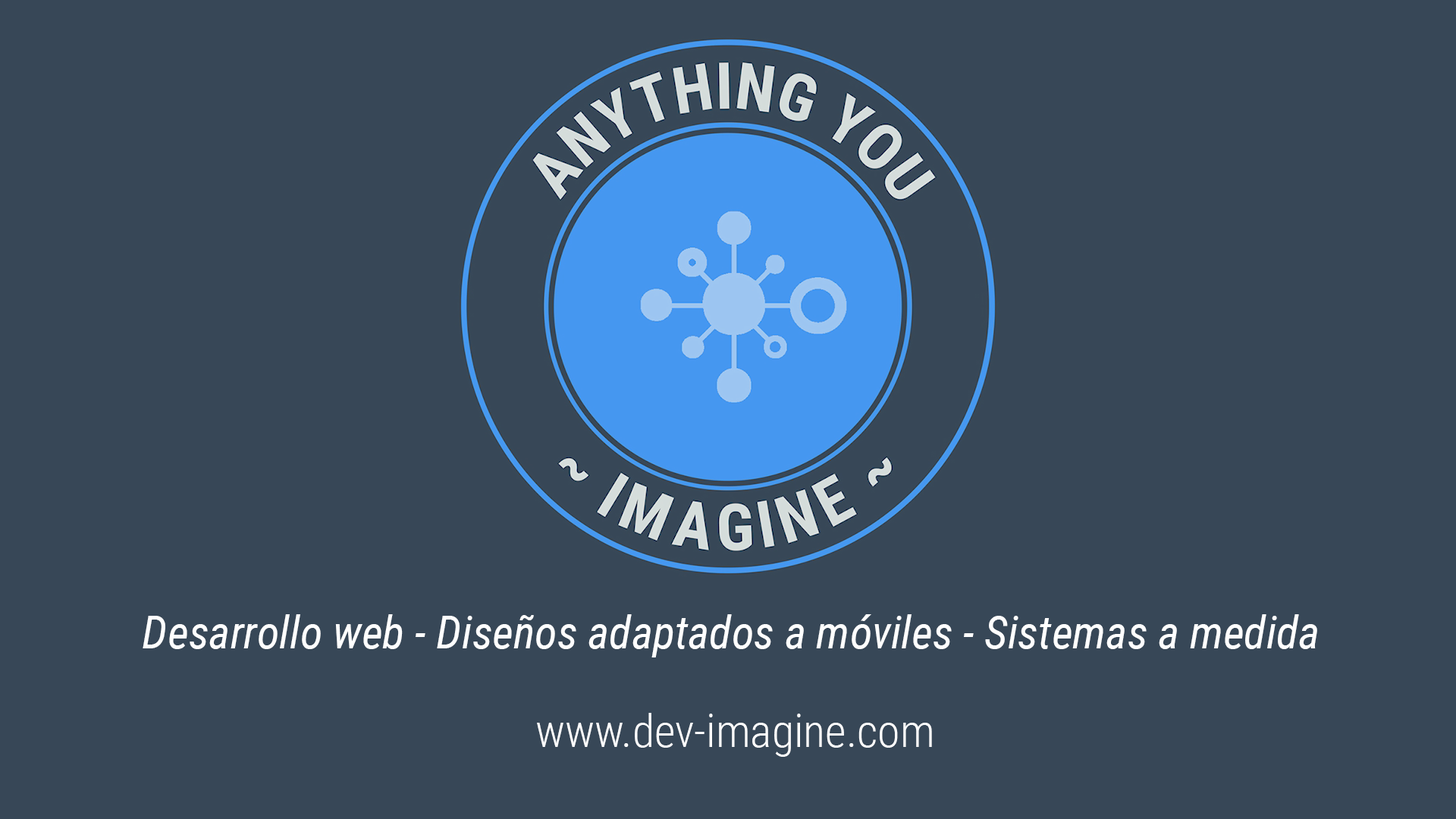
<style>
.page{position:relative;width:1456px;height:819px;background:#374757}
.page>*{position:absolute;margin:0}
.t1{font:45.5px "RobotoCondensed-Italic";color:#ffffff}
.t2{font:45.5px "RobotoCondensed-Light";color:#ffffff}
</style>
<div class="page">
<p class="t1" style="left:143px;top:614px;width:1174px;height:43px">Desarrollo web - Diseños adaptados a móviles - Sistemas a medida</p>
<p class="t2" style="left:537px;top:713px;width:395px;height:44px">www.dev-imagine.com</p>
</div>
